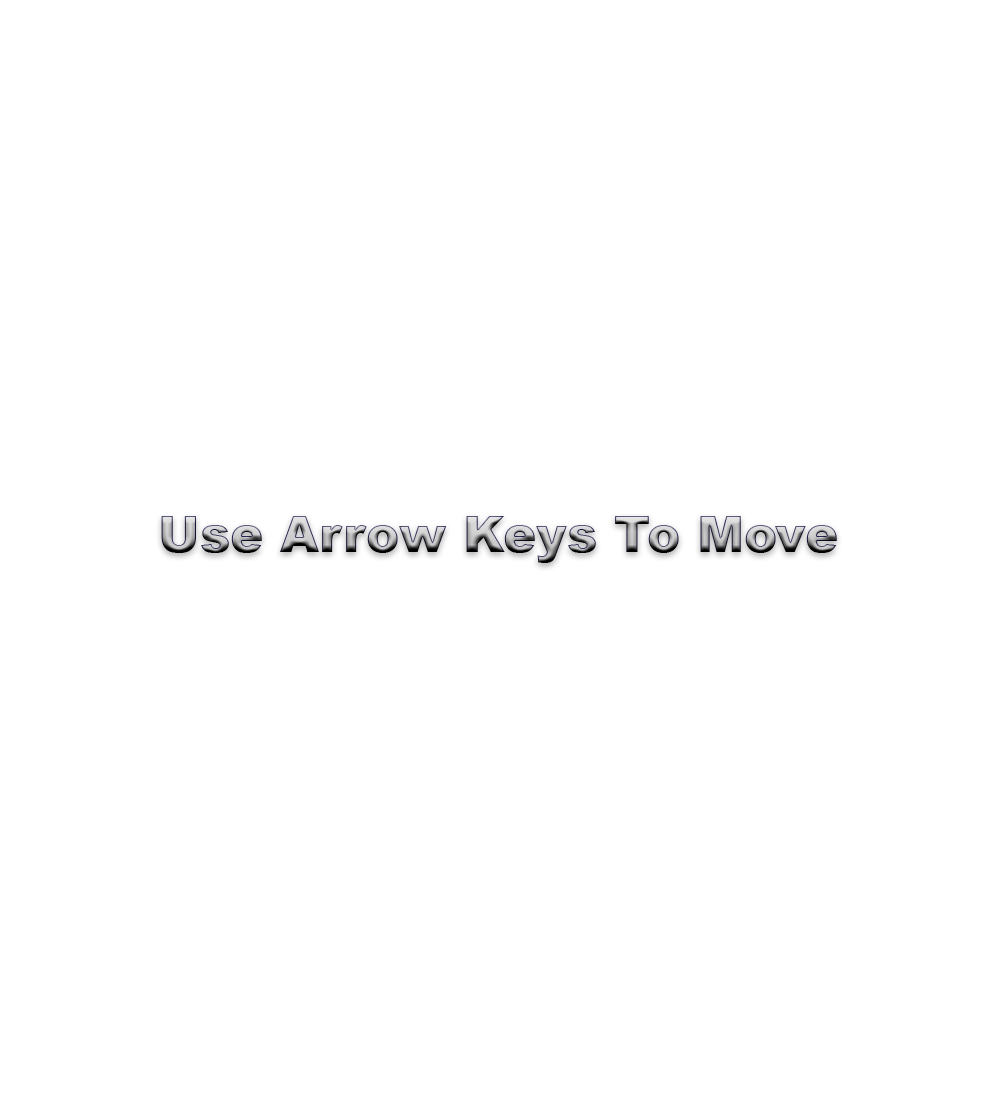
<style>
.page{position:relative;width:995px;height:1103px;background:#ffffff}
.page>*{position:absolute;margin:0}
.t1{font:50px "Arial-Black"}
</style>
<div class="page">
<p class="t1" style="left:161px;top:516px;width:676px;height:47px">Use Arrow Keys To Move</p>
</div>
